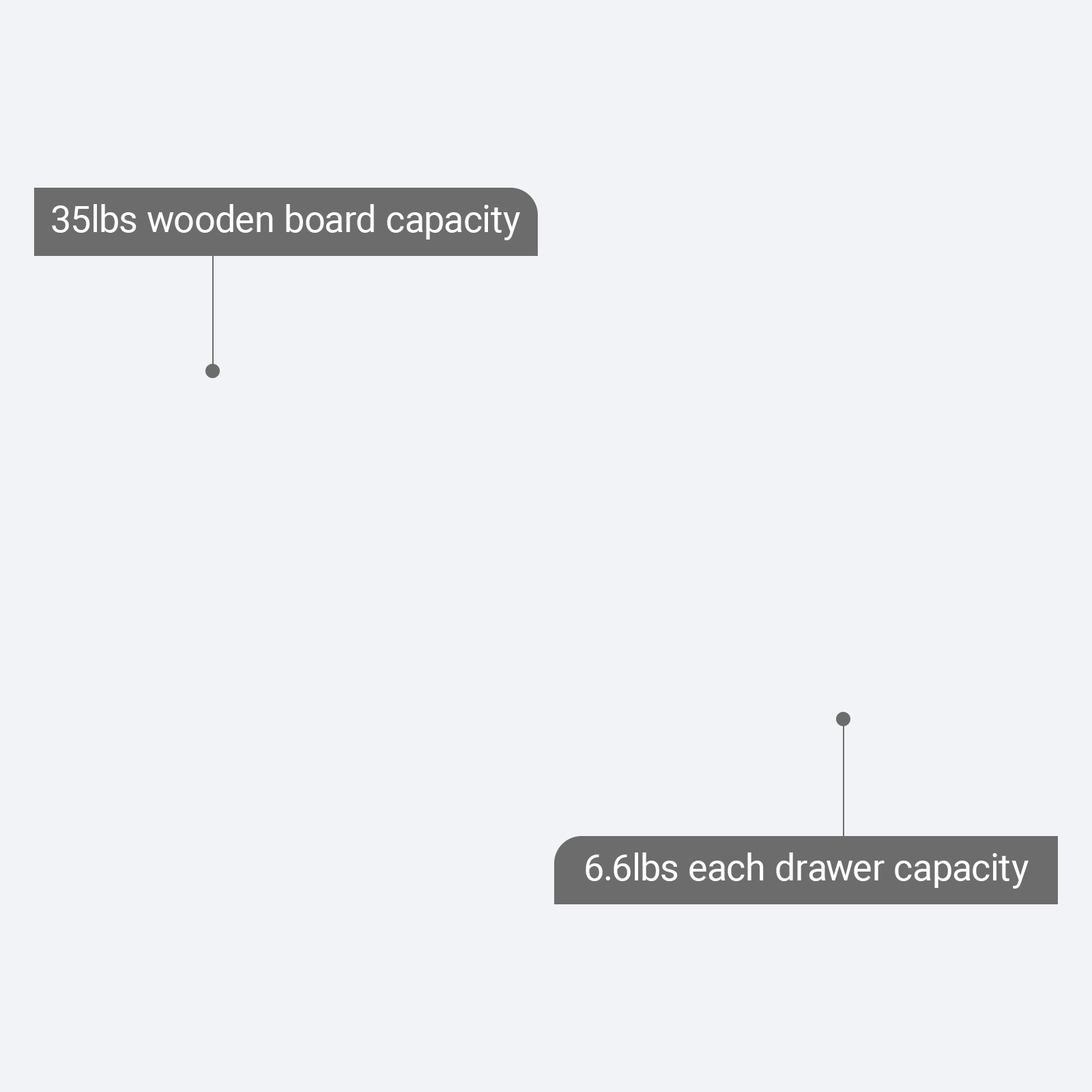
<style>
.page{position:relative;width:1092px;height:1092px;background:#f2f3f6}
.page>*{position:absolute;margin:0}
.t1{font:36.9px "Roboto-Regular";color:#ffffff}
</style>
<div class="page">
<p class="t1" style="left:52px;top:204px;width:468px;height:36px">35lbs wooden board capacity</p>
<p class="t1" style="left:586px;top:852px;width:443px;height:37px">6.6lbs each drawer capacity</p>
</div>
